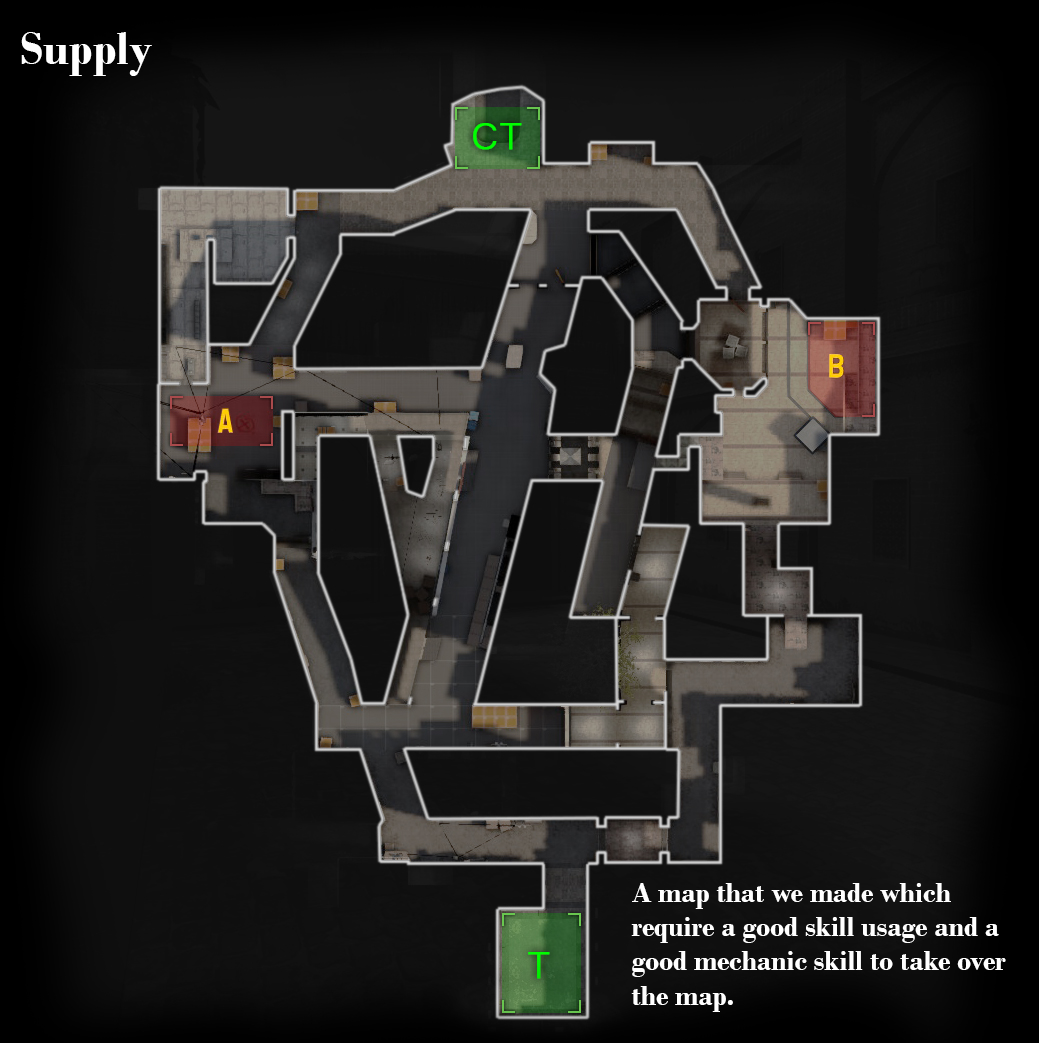
<style>
.page{position:relative;width:1039px;height:1043px}
.page>*{position:absolute;margin:0}
.t1{font:48px "BodoniMT-Bold";color:#ffffff}
.t2{font:28.6px "BodoniMT-Bold";color:#ffffff}
</style>
<div class="page">
<p class="t1" style="left:21px;top:32px;width:131px;height:44px">Supply</p>
<p class="t2" style="left:631px;top:883px;width:375px;height:129px">A map that we made which require a good skill usage and a good mechanic skill to take over the map.</p>
</div>
